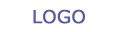
<style>
.page{position:relative;width:122px;height:32px;background:#ffffff}
.page>*{position:absolute;margin:0}
.t1{font:18px "Verdana";color:#5959a5;font-weight:bold}
</style>
<div class="page">
<p class="t1" style="left:33px;top:9px;width:52px;height:15px">LOGO</p>
</div>
